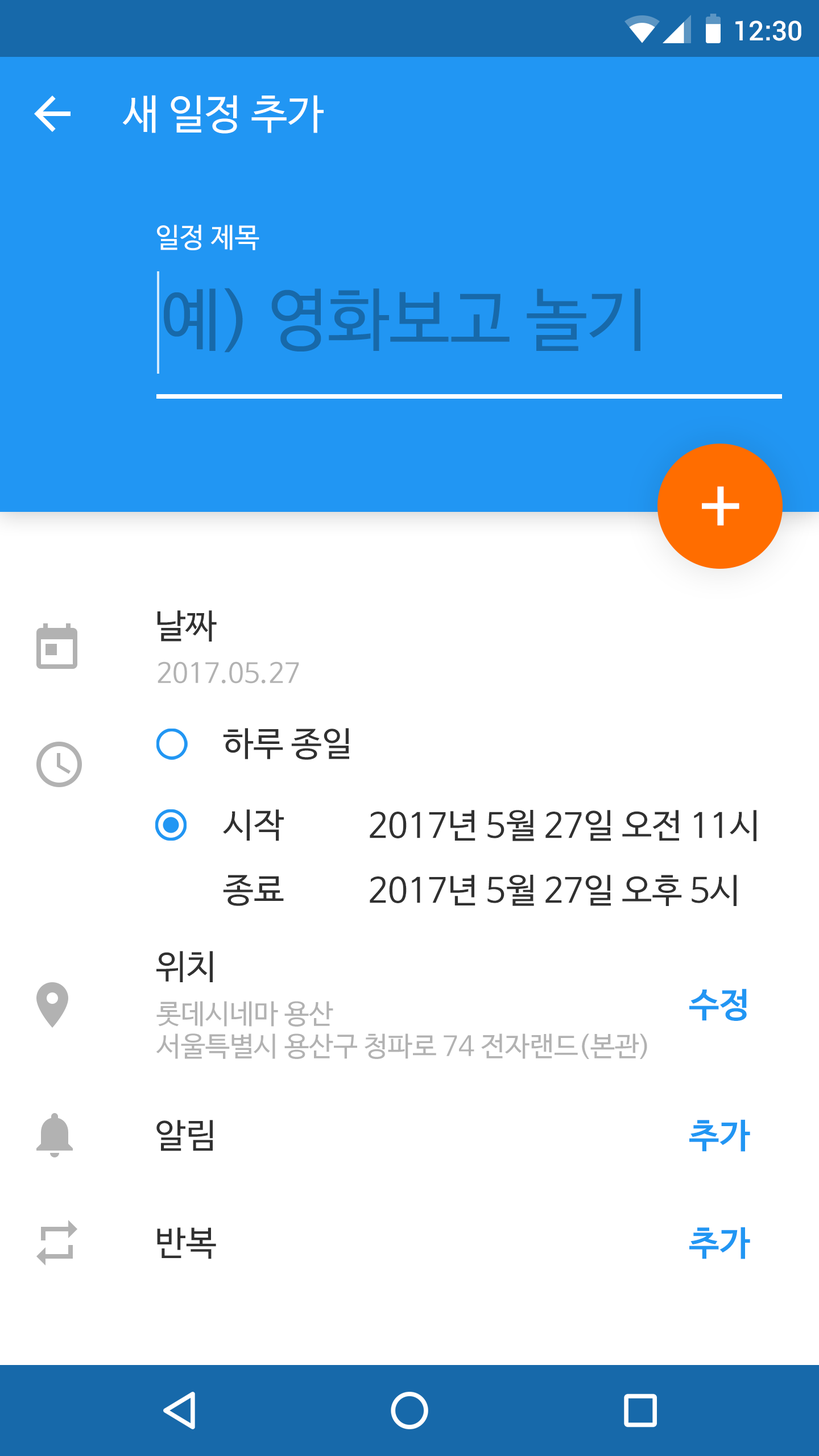
<style>
.page{position:relative;width:819px;height:1456px;background:#ffffff}
.page>*{position:absolute;margin:0}
.t1{font:27.3px "Roboto-Medium";color:#ffffff}
.t2{font:40.9px "NanumBarunGothic";color:#ffffff}
.t3{font:27.3px "NanumBarunGothic";color:#ffffff}
.t4{font:68.2px "NanumBarunGothic";color:#1769aa}
.t5{font:79.6px "NanumBarunGothic";color:#ffffff}
.t6{font:34.1px "NanumBarunGothic";color:#303030}
.t7{font:27.3px "NanumBarunGothic";color:#b2b2b2}
.t8{font:34.1px "NanumBarunGothicBold";color:#2196f3}
</style>
<div class="page">
<p class="t1" style="left:735px;top:20px;width:66px;height:21px">12:30</p>
<p class="t2" style="left:122px;top:95px;width:202px;height:39px">새 일정 추가</p>
<p class="t3" style="left:157px;top:225px;width:102px;height:25px">일정 제목</p>
<p class="t4" style="left:164px;top:288px;width:476px;height:65px">예) 영화보고 놀기</p>
<p class="t5" style="left:702px;top:486px;width:37px;height:40px">+</p>
<p class="t6" style="left:157px;top:610px;width:60px;height:32px">날짜</p>
<p class="t7" style="left:158px;top:661px;width:141px;height:23px">2017.05.27</p>
<p class="t6" style="left:223px;top:728px;width:126px;height:32px">하루 종일</p>
<p class="t6" style="left:223px;top:809px;width:61px;height:32px">시작</p>
<p class="t6" style="left:370px;top:810px;width:386px;height:31px">2017년 5월 27일 오전 11시</p>
<p class="t6" style="left:223px;top:875px;width:61px;height:31px">종료</p>
<p class="t6" style="left:370px;top:875px;width:367px;height:31px">2017년 5월 27일 오후 5시</p>
<p class="t6" style="left:156px;top:951px;width:57px;height:31px">위치</p>
<p class="t8" style="left:689px;top:988px;width:58px;height:33px">수정</p>
<p class="t7" style="left:156px;top:1001px;width:491px;height:58px">롯데시네마 용산<br>서울특별시 용산구 청파로 74 전자랜드(본관)</p>
<p class="t6" style="left:156px;top:1120px;width:57px;height:31px">알림</p>
<p class="t8" style="left:689px;top:1119px;width:61px;height:33px">추가</p>
<p class="t6" style="left:157px;top:1227px;width:59px;height:32px">반복</p>
<p class="t8" style="left:689px;top:1227px;width:61px;height:32px">추가</p>
</div>
